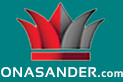
<style>
.page{position:relative;width:123px;height:82px;background:#008080}
.page>*{position:absolute;margin:0}
.t1{font:14px "Sansation-Bold";letter-spacing:0.05em;color:#ffffff}
.t2{font:11px "Sansation-Bold";letter-spacing:0.05em;color:#ffffff}
</style>
<div class="page">
<p class="t1" style="left:1px;top:67px;width:122px;height:10px">ONASANDER.<span class="t2">com</span></p>
</div>
